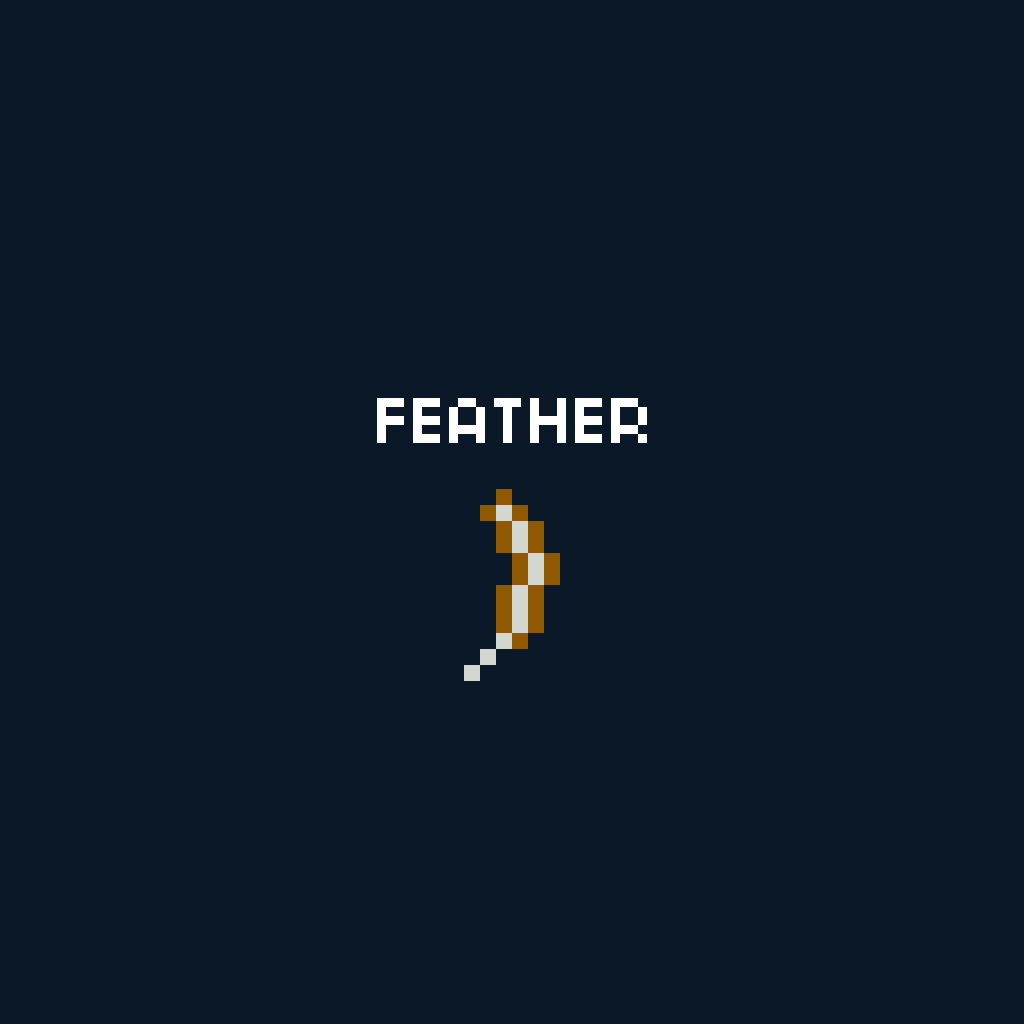
<style>
.page{position:relative;width:1024px;height:1024px;background:#0b1827}
.page>*{position:absolute;margin:0}
.t1{font:72px "04b03";color:#ffffff}
</style>
<div class="page">
<p class="t1" style="left:377px;top:398px;width:270px;height:45px">FEATHER</p>
</div>
